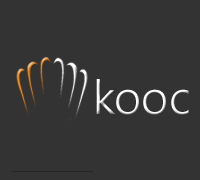
<style>
.page{position:relative;width:200px;height:180px;background:#333333}
.page>*{position:absolute;margin:0}
.t1{font:47.3px "NirmalaUI-Semilight";color:#ffffff}
</style>
<div class="page">
<p class="t1" style="left:96px;top:79px;width:93px;height:36px">kooc</p>
</div>
